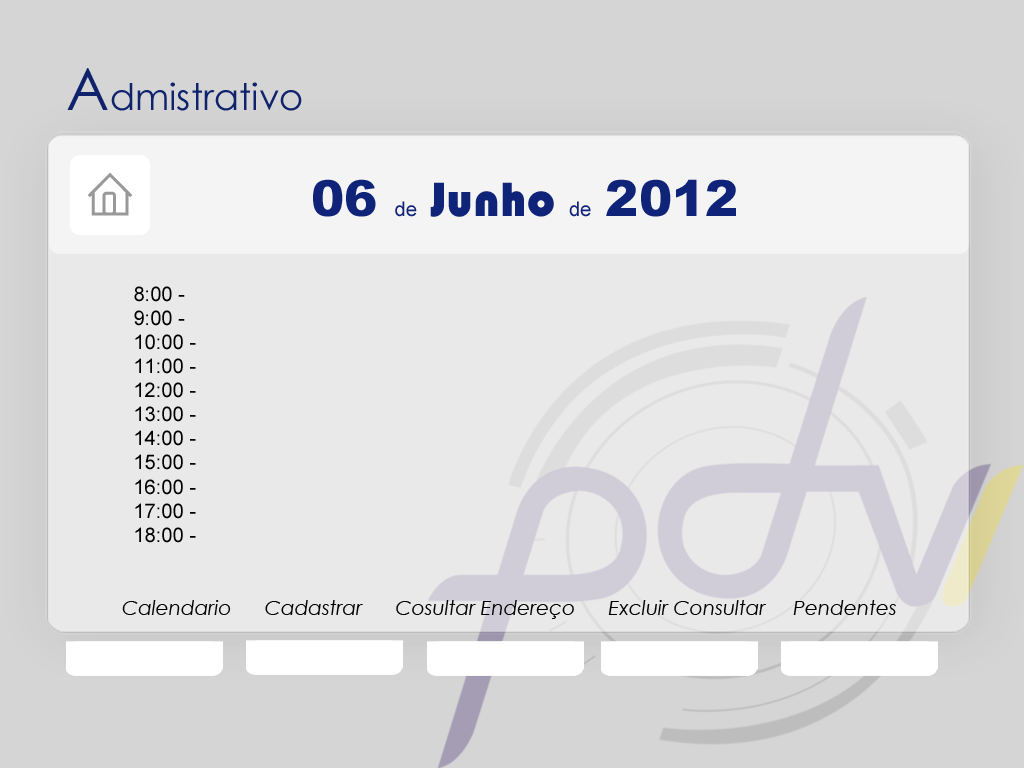
<style>
.page{position:relative;width:1024px;height:768px;background:#e9e9e9}
.page>*{position:absolute;margin:0}
.t1{font:36.6px "CenturyGothic";color:#0f236d}
.t2{font:58.5px "CenturyGothic";color:#0f236d}
.t3{font:20.1px "ArialMT";color:#000000}
.t4{font:50.1px "Arial-Black";color:#0f2378}
.t5{font:20.1px "ArialMT";color:#0f2378}
.t6{font:50.1px "Bauhaus93";color:#0f2378}
.t7{font:20px "CenturyGothic-Italic";color:#000000}
</style>
<div class="page">
<p class="t1" style="left:67px;top:68px;width:235px;height:43px"><span class="t2">A</span>dmistrativo</p>
<p class="t3" style="left:134px;top:179px;width:602px;height:364px;text-align:center"><span class="t4">06 </span><span class="t5">de </span><span class="t6">Junho </span><span class="t5">de </span><span class="t4">2012<br><br></span>8:00 - <br>9:00 - <br>10:00 - <br>11:00 - <br>12:00 - <br>13:00 - <br>14:00 - <br>15:00 - <br>16:00 - <br>17:00 - <br>18:00 -</p>
<p class="t7" style="left:122px;top:600px;width:774px;height:19px">Calendario      Cadastrar      Cosultar Endereço      Excluir Consultar     Pendentes</p>
</div>
